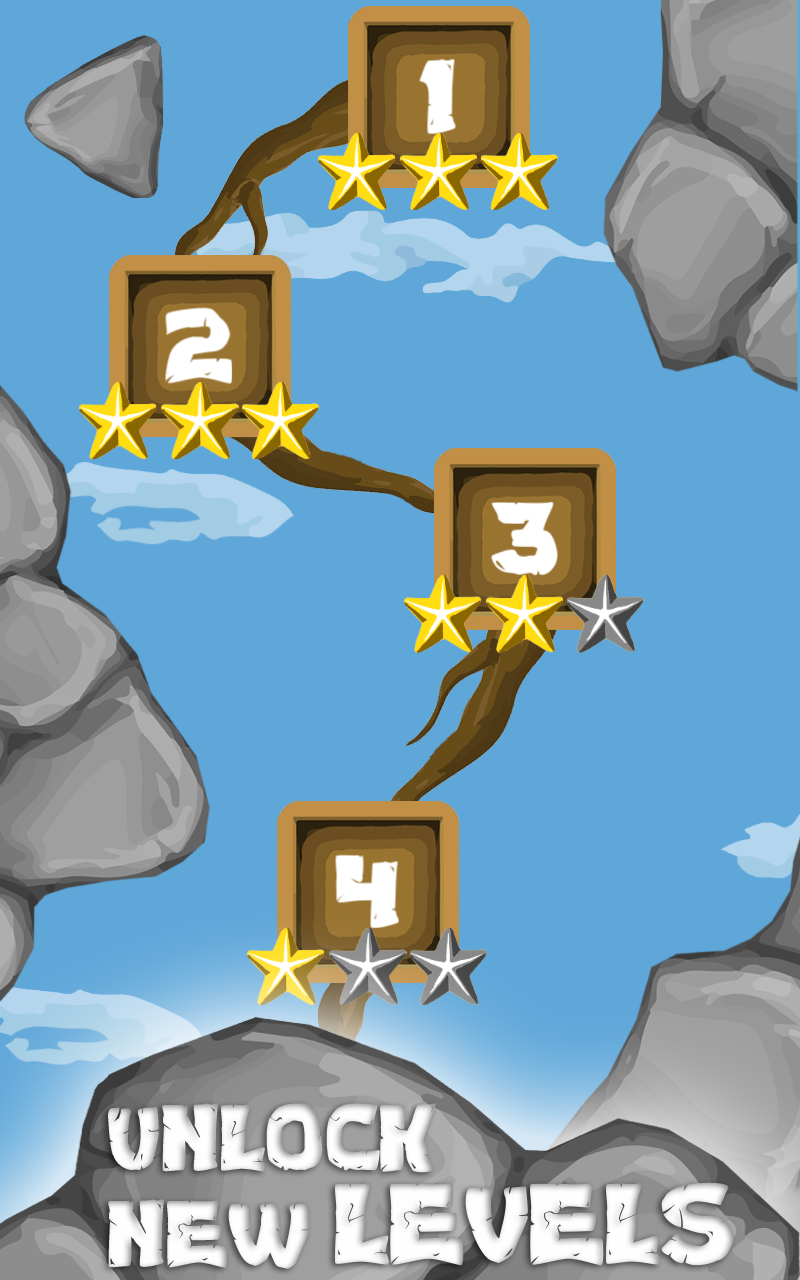
<style>
.page{position:relative;width:800px;height:1280px;background:#5fa7d9}
.page>*{position:absolute;margin:0}
.t1{font:92px "Turtles";color:#fefefe}
.t2{font:112px "Turtles";color:#fefefe}
</style>
<div class="page">
<p class="t1" style="left:108px;top:1103px;width:328px;height:70px">UNLOCK</p>
<p class="t2" style="left:334px;top:1182px;width:400px;height:84px">LEVELS</p>
<p class="t1" style="left:108px;top:1199px;width:201px;height:70px">NEW</p>
</div>
